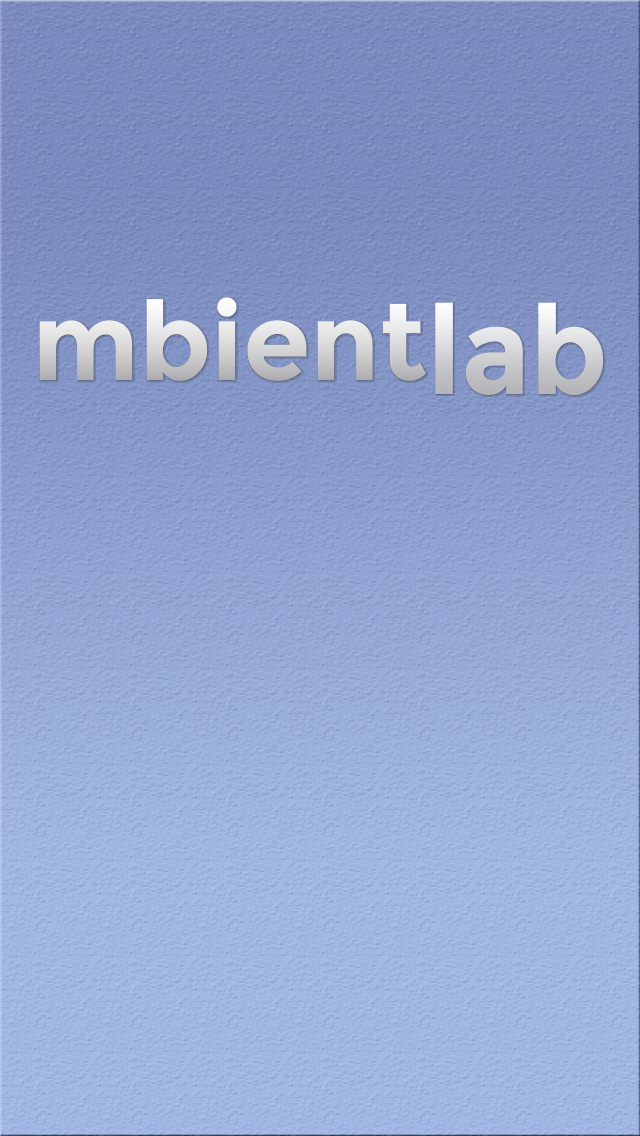
<style>
.page{position:relative;width:640px;height:1136px}
.page>*{position:absolute;margin:0}
.t1{font:108.7px "Montserrat-Bold"}
.t2{font:122.8px "Montserrat-Bold";scale:0.95 1}
</style>
<div class="page">
<p class="t1" style="left:39px;top:297px;width:387px;height:84px">mbient</p>
<p class="t2" style="left:435px;top:302px;width:169px;height:93px">lab</p>
</div>
